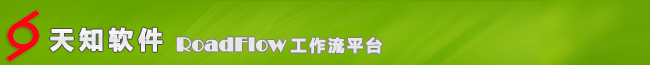
<style>
.page{position:relative;width:650px;height:65px}
.page>*{position:absolute;margin:0}
.t1{font:24px "MicrosoftYaHei-Bold";letter-spacing:0.2em;color:#e6e7e7;font-weight:bold}
.t2{font:20px "Broadway";color:#e7e7e7;font-weight:bold}
.t3{font:16px "MicrosoftYaHei-Bold";letter-spacing:0.15em;color:#e7e7e7;font-weight:bold}
</style>
<div class="page">
<p class="t1" style="left:50px;top:27px;width:113px;height:25px">天知软件</p>
<p class="t2" style="left:176px;top:37px;width:207px;height:17px">RoadFlow <span class="t3">工作流平台</span></p>
</div>
